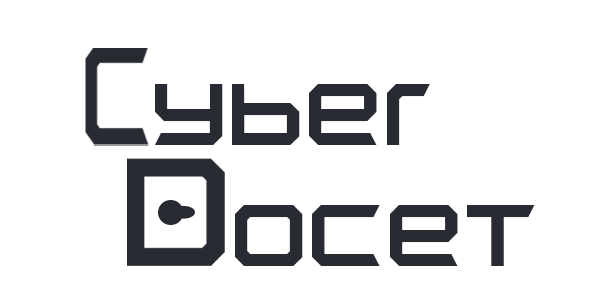
<style>
.page{position:relative;width:600px;height:300px;background:#ffffff}
.page>*{position:absolute;margin:0}
.t1{font:104.4px "FROSTBITENarrow-Regular";color:#292b33}
</style>
<div class="page">
<p class="t1" style="left:155px;top:84px;width:275px;height:61px">yber</p>
<p class="t1" style="left:235px;top:205px;width:300px;height:61px">ocet</p>
</div>
